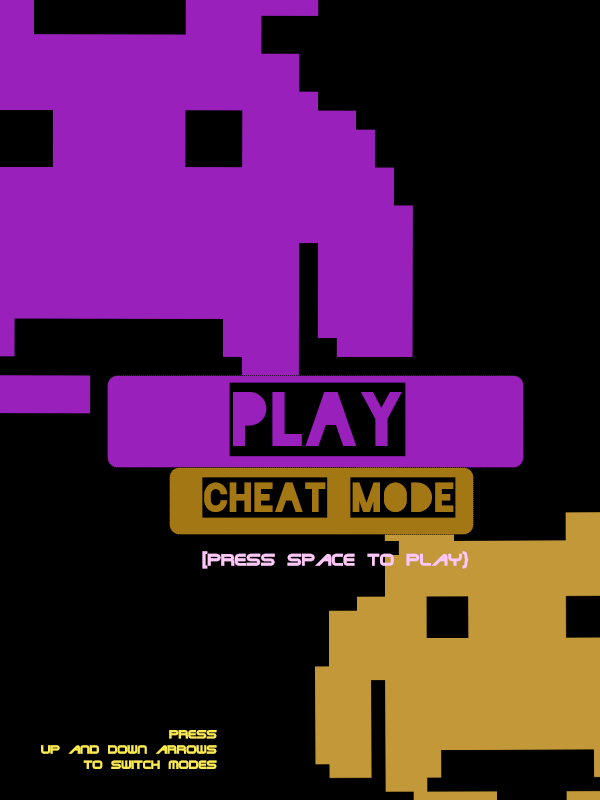
<style>
.page{position:relative;width:600px;height:800px;background:#000000}
.page>*{position:absolute;margin:0}
.t1{font:87.4px "Blackout-2AM";color:#000000}
.t2{font:48px "Blackout-2AM";color:#000000}
.t3{font:18px "TerminatorTwo";color:#ffc8f9}
.t4{font:12.7px "TerminatorTwo";color:#fcea54}
</style>
<div class="page">
<p class="t1" style="left:229px;top:382px;width:177px;height:75px">Play</p>
<p class="t2" style="left:202px;top:477px;width:254px;height:41px">cheat mode</p>
<p class="t3" style="left:202px;top:551px;width:267px;height:18px">[Press space to play}</p>
<p class="t4" style="left:41px;top:730px;width:176px;height:39px;text-align:right">press<br>up and down arrows<br> to switch modes</p>
</div>
